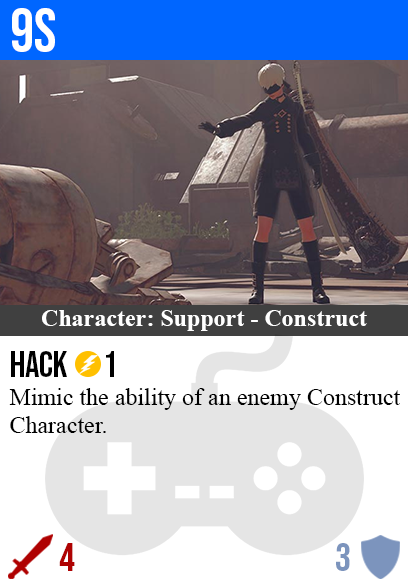
<style>
.page{position:relative;width:408px;height:585px;background:#ffffff}
.page>*{position:absolute;margin:0}
.t1{font:60px "BebasNeue-Regular";color:#ffffff}
.t2{font:24px "TimesNewRomanPS-BoldMT";color:#ffffff}
.t3{font:36px "BebasNeue-Regular";color:#000000}
.t4{font:24px "TimesNewRomanPSMT";color:#000000}
.t5{font:40px "BebasNeue-Regular";color:#af0202}
.t6{font:40px "BebasNeue-Regular";color:#7c94bd}
</style>
<div class="page">
<p class="t1" style="left:12px;top:8px;width:43px;height:44px">9s</p>
<p class="t2" style="left:42px;top:310px;width:325px;height:21px">Character: Support - Construct</p>
<p class="t3" style="left:11px;top:351px;width:103px;height:26px">hack      1</p>
<p class="t4" style="left:9px;top:388px;width:391px;height:45px">Mimic the ability of an enemy Construct<br>Character.</p>
<p class="t5" style="left:59px;top:543px;width:16px;height:28px">4</p>
<p class="t6" style="left:336px;top:543px;width:14px;height:28px">3</p>
</div>
